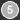
<style>
.page{position:relative;width:20px;height:20px;background:#b0b0b0}
.page>*{position:absolute;margin:0}
.t1{font:11px "Helvetica";color:#ffffff}
</style>
<div class="page">
<p class="t1" style="left:7px;top:5px;width:6px;height:9px">5</p>
</div>
